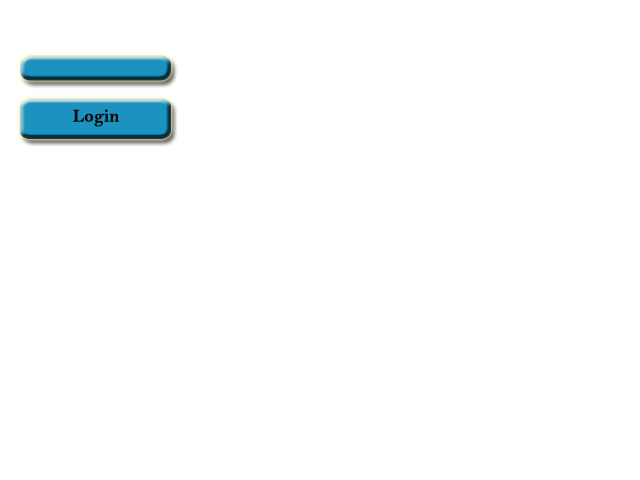
<style>
.page{position:relative;width:640px;height:480px;background:#ffffff}
.page>*{position:absolute;margin:0}
.t1{font:18px "BellMTBold";color:#0c0b0b}
</style>
<div class="page">
<p class="t1" style="left:73px;top:109px;width:46px;height:18px">Login</p>
</div>
